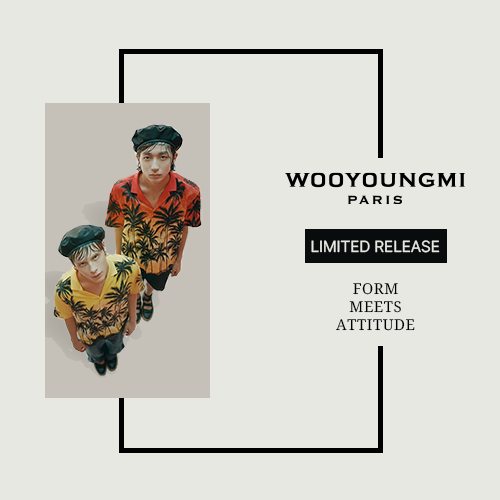
<style>
.page{position:relative;width:500px;height:500px;background:#e7e8e2}
.page>*{position:absolute;margin:0}
.t1{font:16px "Pretendard-Regular";color:#e7e8e2}
.t2{font:15px "NotoSerif-Regular";letter-spacing:0.04em;color:#000000}
</style>
<div class="page">
<p class="t1" style="left:311px;top:240px;width:129px;height:13px">LIMITED RELEASE</p>
<p class="t2" style="left:336px;top:283px;width:79px;height:48px;text-align:center">FORM<br>MEETS<br>ATTITUDE</p>
</div>
